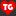
<style>
.page{position:relative;width:16px;height:16px;background:#333333}
.page>*{position:absolute;margin:0}
.t1{font:9px "Bauhaus93";color:#ffffff}
</style>
<div class="page">
<p class="t1" style="left:3px;top:4px;width:10px;height:6px">TG</p>
</div>
